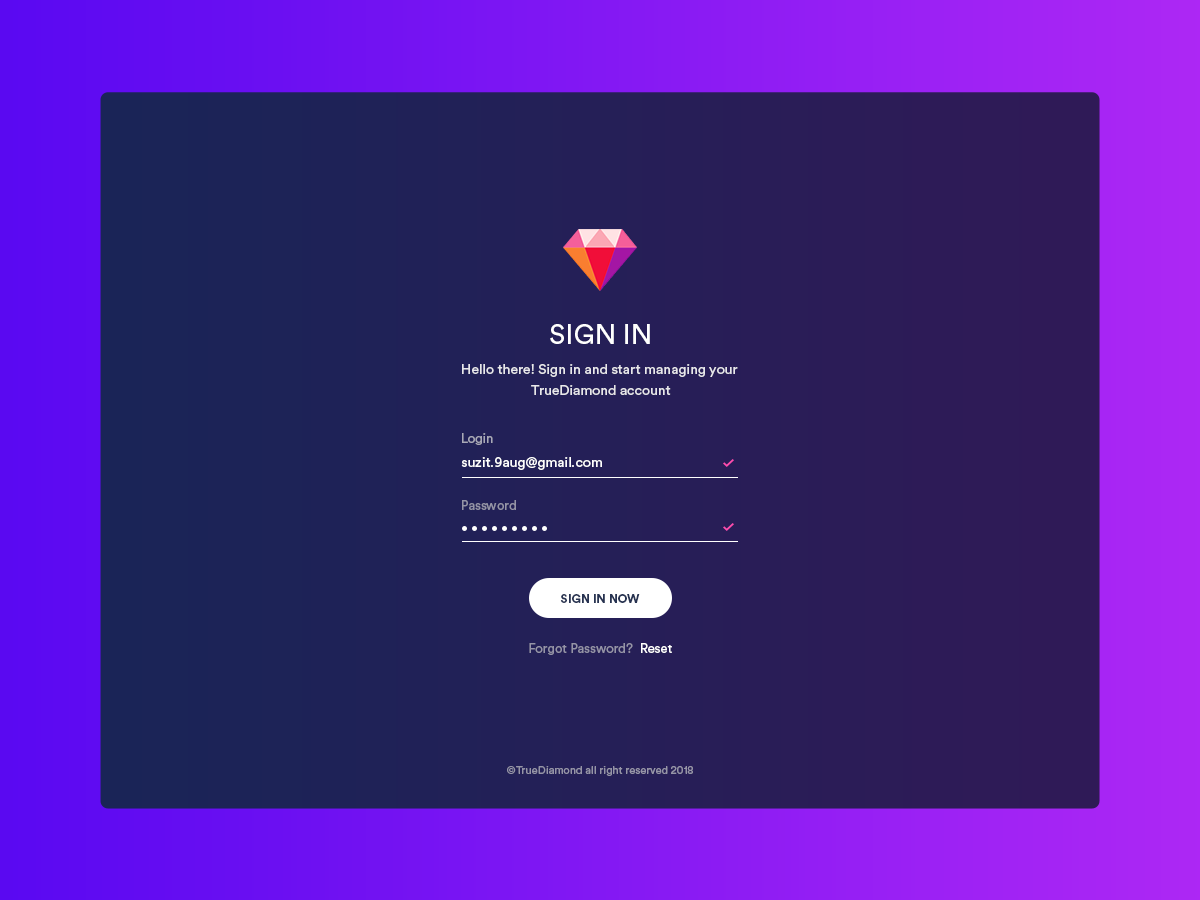
<style>
.page{position:relative;width:1200px;height:900px}
.page>*{position:absolute;margin:0}
.t1{font:28px "CircularStd-Book";color:#ffffff}
.t2{font:14px/21px "CircularStd-Book";color:#ffffff}
.t3{font:13px "CircularStd-Book";color:#a9a9b8}
.t4{font:14px "CircularStd-Book";color:#ffffff}
.t5{font:13px "CircularStd-Book";color:#9594a7}
.t6{font:12px "CircularStd-Bold";color:#273352}
.t7{font:13px "CircularStd-Book";color:#ffffff}
.t8{font:11px "CircularStd-Book";color:#9594a7}
</style>
<div class="page">
<p class="t1" style="left:550px;top:324px;width:100px;height:20px">SIGN IN</p>
<p class="t2" style="left:462px;top:364px;width:276px;height:31px;text-align:center;opacity:0.85">Hello there! Sign in and start managing your <br>TrueDiamond account</p>
<p class="t3" style="left:462px;top:433px;width:31px;height:12px">Login</p>
<p class="t4" style="left:461px;top:457px;width:141px;height:13px">suzit.9aug@gmail.com</p>
<p class="t5" style="left:462px;top:500px;width:54px;height:10px">Password</p>
<p class="t6" style="left:560px;top:594px;width:80px;height:9px">SIGN IN NOW</p>
<p class="t5" style="left:529px;top:643px;width:104px;height:12px">Forgot Password?</p>
<p class="t7" style="left:641px;top:643px;width:31px;height:10px">Reset</p>
<p class="t8" style="left:507px;top:766px;width:186px;height:10px">©TrueDiamond all right reserved 2018</p>
</div>
